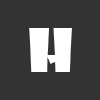
<style>
.page{position:relative;width:100px;height:100px;background:#333333}
.page>*{position:absolute;margin:0}
.t1{font:58.3px "ShowcardGothic-Reg";color:#ffffff}
</style>
<div class="page">
<p class="t1" style="left:29px;top:28px;width:43px;height:44px">h</p>
</div>
